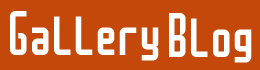
<style>
.page{position:relative;width:260px;height:70px;background:#c5480b}
.page>*{position:absolute;margin:0}
.t1{font:44px "Mocha";color:#ffffff}
</style>
<div class="page">
<p class="t1" style="left:10px;top:11px;width:149px;height:50px">Gallery</p>
<p class="t1" style="left:169px;top:13px;width:83px;height:50px">Blog</p>
</div>
